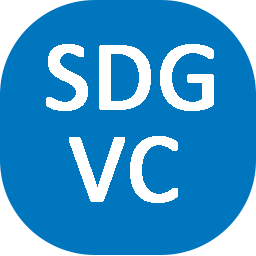
<style>
.page{position:relative;width:256px;height:256px;background:#0076bf}
.page>*{position:absolute;margin:0}
.t1{font:100px "Calibri";color:#ffffff;font-weight:bold}
</style>
<div class="page">
<p class="t1" style="left:46px;top:44px;width:168px;height:67px">SDG</p>
<p class="t1" style="left:69px;top:136px;width:109px;height:67px">VC</p>
</div>
